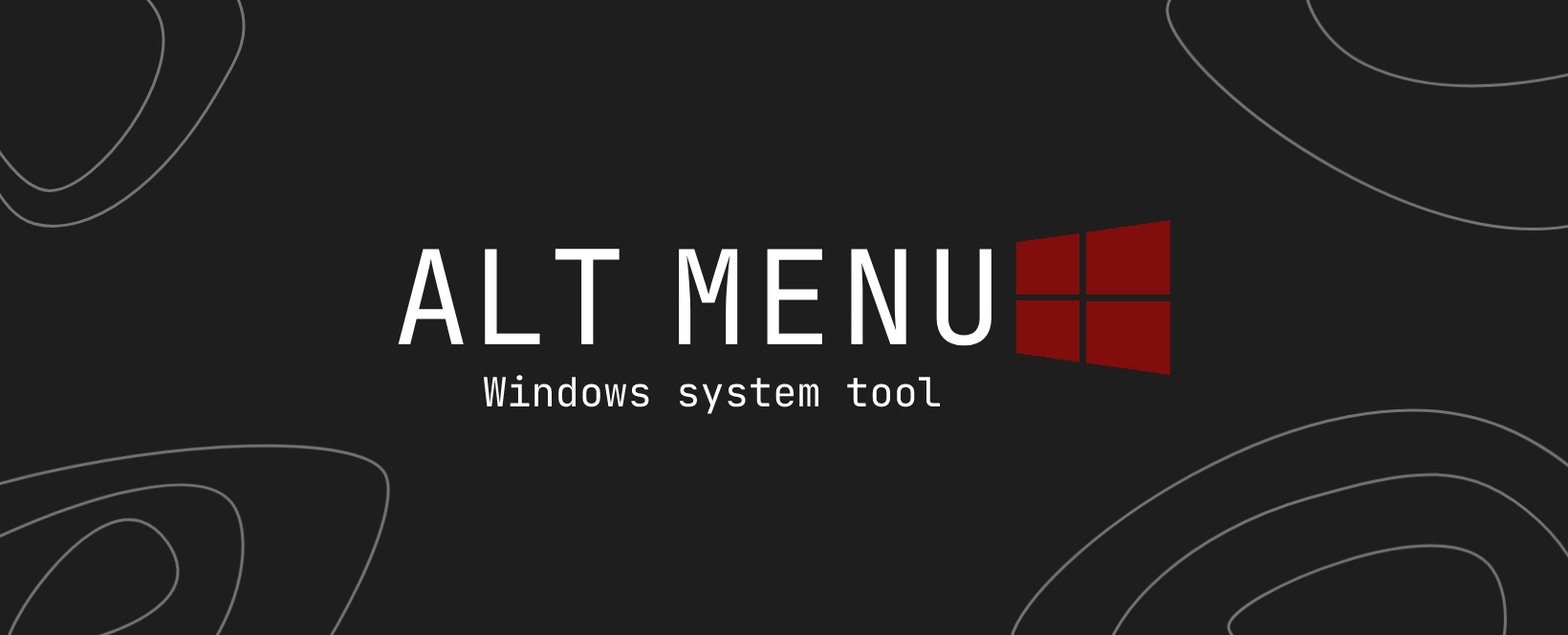
<style>
.page{position:relative;width:1568px;height:635px;background:#1e1e1e}
.page>*{position:absolute;margin:0}
.t1{font:130.3px "JetBrainsMono-Regular";color:#ffffff}
.t2{font:40.3px "JetBrainsMono-Regular";color:#ffffff}
</style>
<div class="page">
<p class="t1" style="left:398px;top:249px;width:593px;height:97px">ALT      M E N U</p>
<p class="t2" style="left:484px;top:375px;width:456px;height:39px">Windows system tool</p>
</div>
